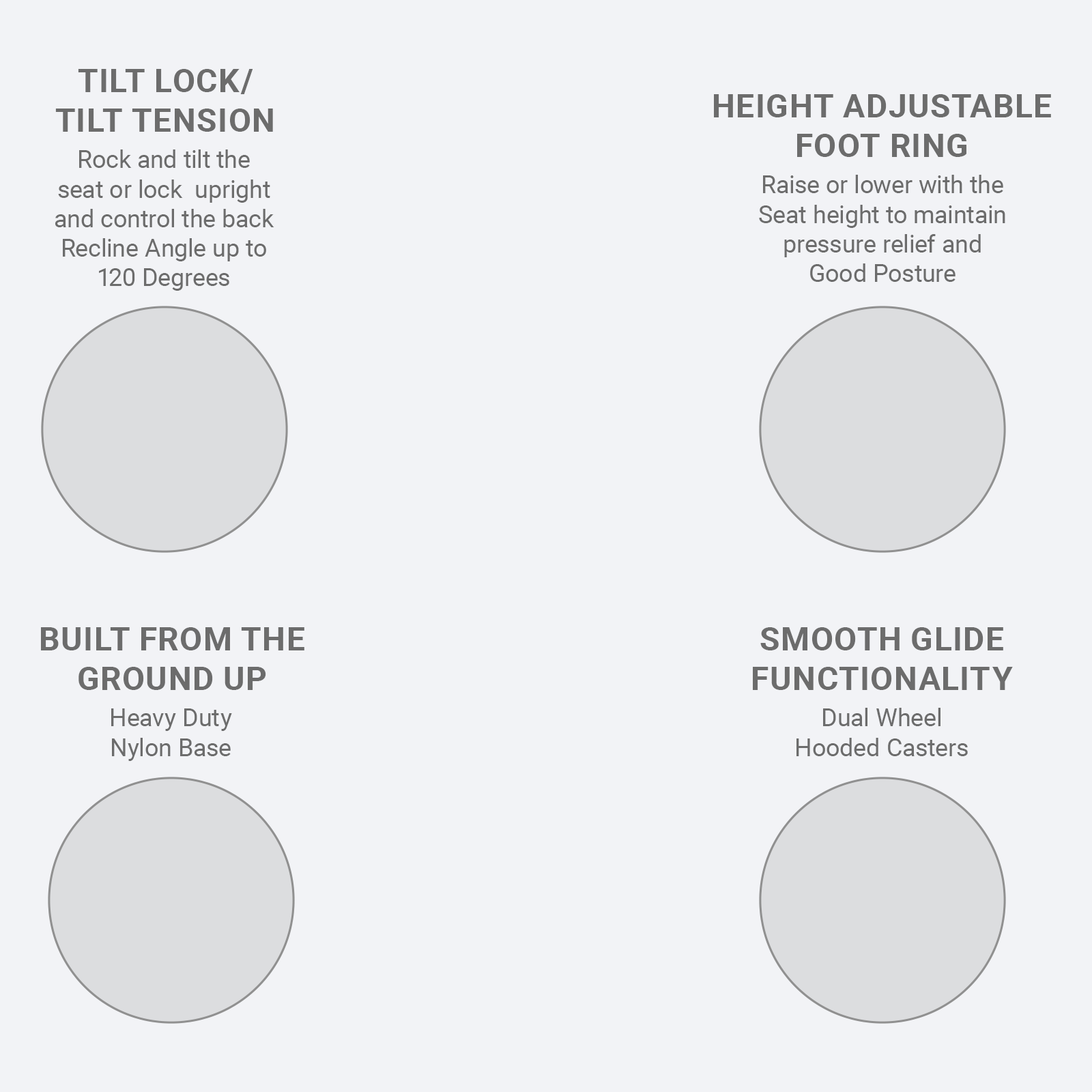
<style>
.page{position:relative;width:1092px;height:1092px;background:#f2f3f6}
.page>*{position:absolute;margin:0}
.t1{font:32.8px "Roboto-Bold";color:#6c6c6c;text-transform:uppercase}
.t2{font:24.6px "Roboto-Regular";color:#6c6c6c}
</style>
<div class="page">
<p class="t1" style="left:55px;top:69px;width:218px;height:63px;text-align:center">Tilt lock/<br>tilt tension</p>
<p class="t1" style="left:714px;top:94px;width:337px;height:63px;text-align:center">Height adjustable<br>Foot ring</p>
<p class="t2" style="left:55px;top:149px;width:219px;height:142px;text-align:center">Rock and tilt the<br>seat or lock  upright<br>and control the back<br>Recline Angle up to<br>120 Degrees</p>
<p class="t2" style="left:759px;top:175px;width:246px;height:107px;text-align:center">Raise or lower with the<br>Seat height to maintain<br>pressure relief and<br>Good Posture</p>
<p class="t1" style="left:41px;top:627px;width:263px;height:63px;text-align:center">Built from the<br>ground up</p>
<p class="t1" style="left:753px;top:627px;width:260px;height:63px;text-align:center">Smooth glide<br>functionality</p>
<p class="t2" style="left:111px;top:708px;width:121px;height:53px;text-align:center">Heavy Duty<br>Nylon Base</p>
<p class="t2" style="left:796px;top:708px;width:172px;height:48px;text-align:center">Dual Wheel<br>Hooded Casters</p>
</div>
